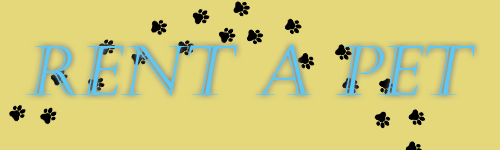
<style>
.page{position:relative;width:500px;height:150px;background:#e4d87a}
.page>*{position:absolute;margin:0}
.t1{font:68.9px "Castellar";color:#5bc8f5;font-style:italic}
</style>
<div class="page">
<p class="t1" style="left:26px;top:45px;width:449px;height:51px">RENT A PET</p>
</div>
